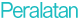
<style>
.page{position:relative;width:82px;height:21px;background:#ffffff}
.page>*{position:absolute;margin:0}
.t1{font:20px "GothicMB101Pro-Regular";letter-spacing:-0.06em;color:#1dbcc0;scale:0.9 1}
</style>
<div class="page">
<p class="t1" style="left:1px;top:2px;width:77px;height:16px">Peralatan</p>
</div>
